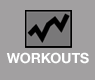
<style>
.page{position:relative;width:95px;height:80px;background:#a2a0a1}
.page>*{position:absolute;margin:0}
.t1{font:14px "HelveticaNeue-Bold";color:#feffff}
</style>
<div class="page">
<p class="t1" style="left:6px;top:52px;width:83px;height:12px">WORKOUTS</p>
</div>
